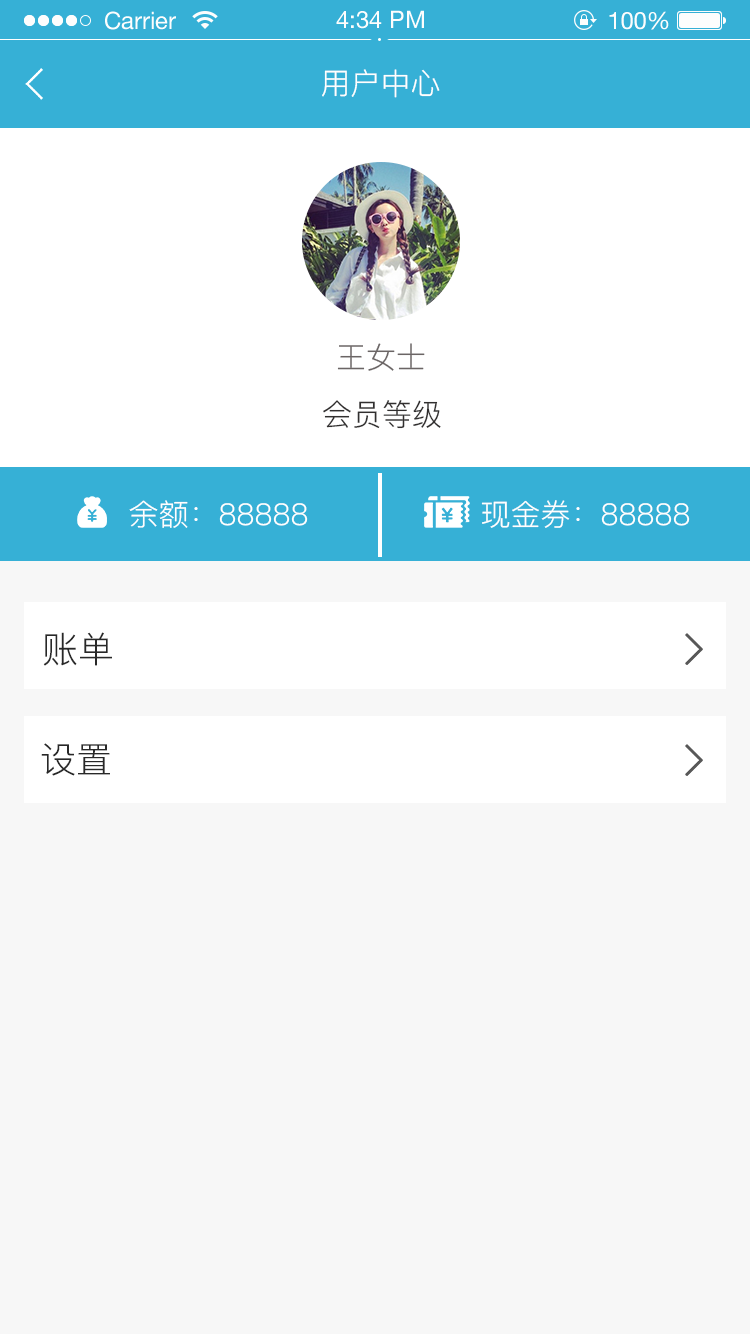
<style>
.page{position:relative;width:750px;height:1334px;background:#f7f7f7}
.page>*{position:absolute;margin:0}
.t1{font:30px "PingFang-SC-Regular";color:#ffffff}
.t2{font:30px "PingFang-SC-Regular";color:#6b6565}
.t3{font:30px "PingFang-SC-Regular";color:#312f2f}
.t4{font:36px "PingFang-SC-Regular";color:#282828}
</style>
<div class="page">
<p class="t1" style="left:322px;top:69px;width:118px;height:29px">用户中心</p>
<p class="t2" style="left:337px;top:343px;width:88px;height:28px">王女士</p>
<p class="t3" style="left:323px;top:400px;width:118px;height:29px">会员等级</p>
<p class="t1" style="left:129px;top:500px;width:179px;height:28px">余额：88888</p>
<p class="t1" style="left:481px;top:500px;width:209px;height:28px">现金券：88888</p>
<p class="t4" style="left:43px;top:632px;width:69px;height:34px">账单</p>
<p class="t4" style="left:41px;top:743px;width:69px;height:33px">设置</p>
</div>
